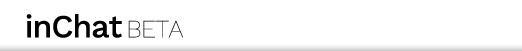
<style>
.page{position:relative;width:522px;height:51px;background:#ffffff}
.page>*{position:absolute;margin:0}
.t1{font:32.1px "WorkSans-Medium";letter-spacing:-0.03em;color:#000000}
.t2{font:24.8px "WorkSans-Thin";letter-spacing:-0.01em;color:#000000}
</style>
<div class="page">
<p class="t1" style="left:26px;top:14px;width:157px;height:24px">inChat <span class="t2">BETA</span></p>
</div>
